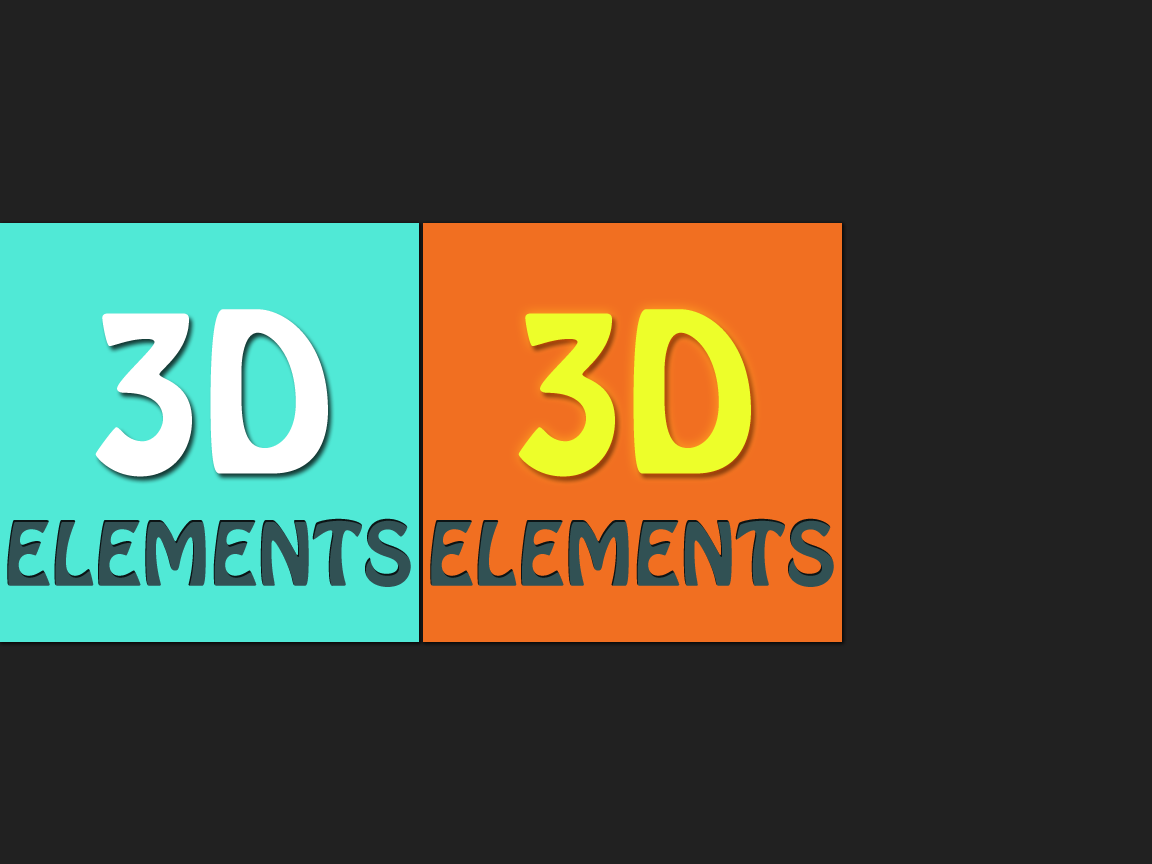
<style>
.page{position:relative;width:1152px;height:864px;background:#212121}
.page>*{position:absolute;margin:0}
.t1{font:197px "HoboStd";color:#ffffff}
.t2{font:197px "HoboStd";color:#edfe2a}
.t3{font:79px "HoboStd";color:#315154}
</style>
<div class="page">
<p class="t1" style="left:95px;top:309px;width:233px;height:168px">3D</p>
<p class="t2" style="left:518px;top:309px;width:233px;height:168px">3D</p>
<p class="t3" style="left:7px;top:518px;width:404px;height:69px">ELEMENTS</p>
<p class="t3" style="left:430px;top:518px;width:404px;height:69px">ELEMENTS</p>
</div>
